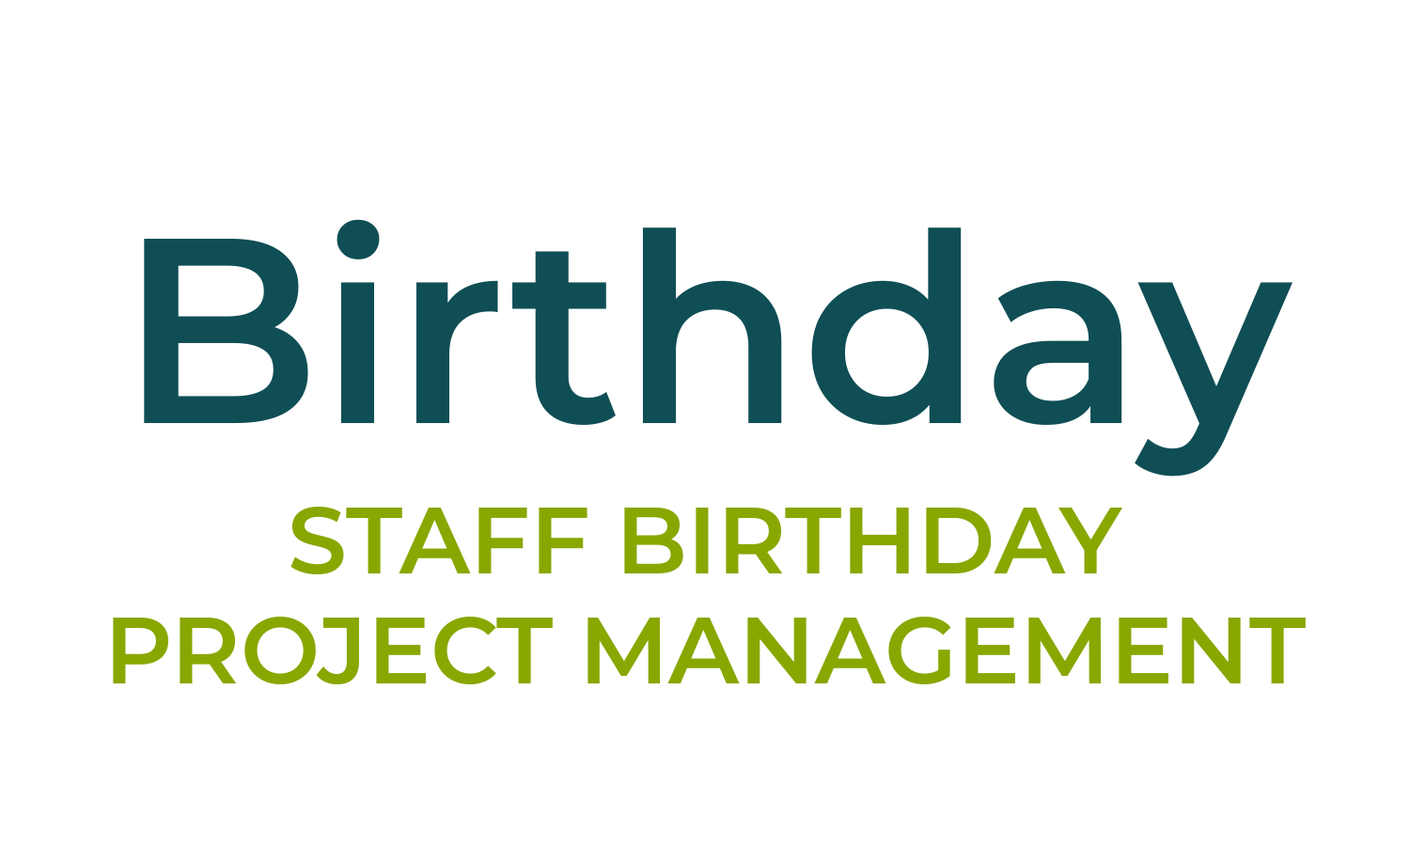
<style>
.page{position:relative;width:1410px;height:846px;background:#ffffff}
.page>*{position:absolute;margin:0}
.t1{font:263.1px "Montserrat-SemiBold";color:#0f4e54}
.t2{font:94px/0.2px "Montserrat-SemiBold";color:#88a700;text-transform:uppercase}
</style>
<div class="page">
<p class="t1" style="left:144px;top:219px;width:1148px;height:257px">Birthday</p>
<p class="t2" style="left:113px;top:507px;width:1192px;height:177px;text-align:center">STAFF BIRTHDAY<br>project management</p>
</div>
